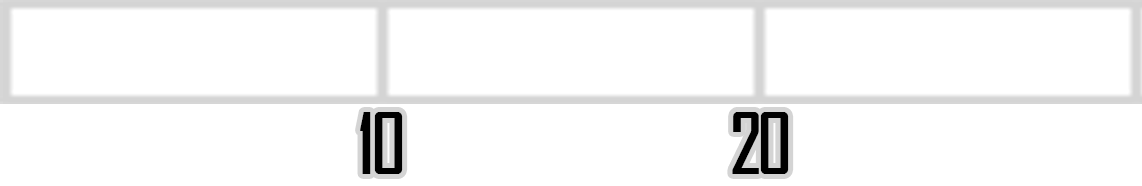
<style>
.page{position:relative;width:1142px;height:186px;background:#ffffff}
.page>*{position:absolute;margin:0}
.t1{font:19.2px "AgencyFB-Reg";letter-spacing:-0.07em;color:#000000;font-weight:bold}
</style>
<div class="page">
<p class="t1" style="left:360px;top:112px;width:43px;height:62px;text-align:center">10</p>
<p class="t1" style="left:732px;top:112px;width:57px;height:62px;text-align:center">20</p>
</div>
